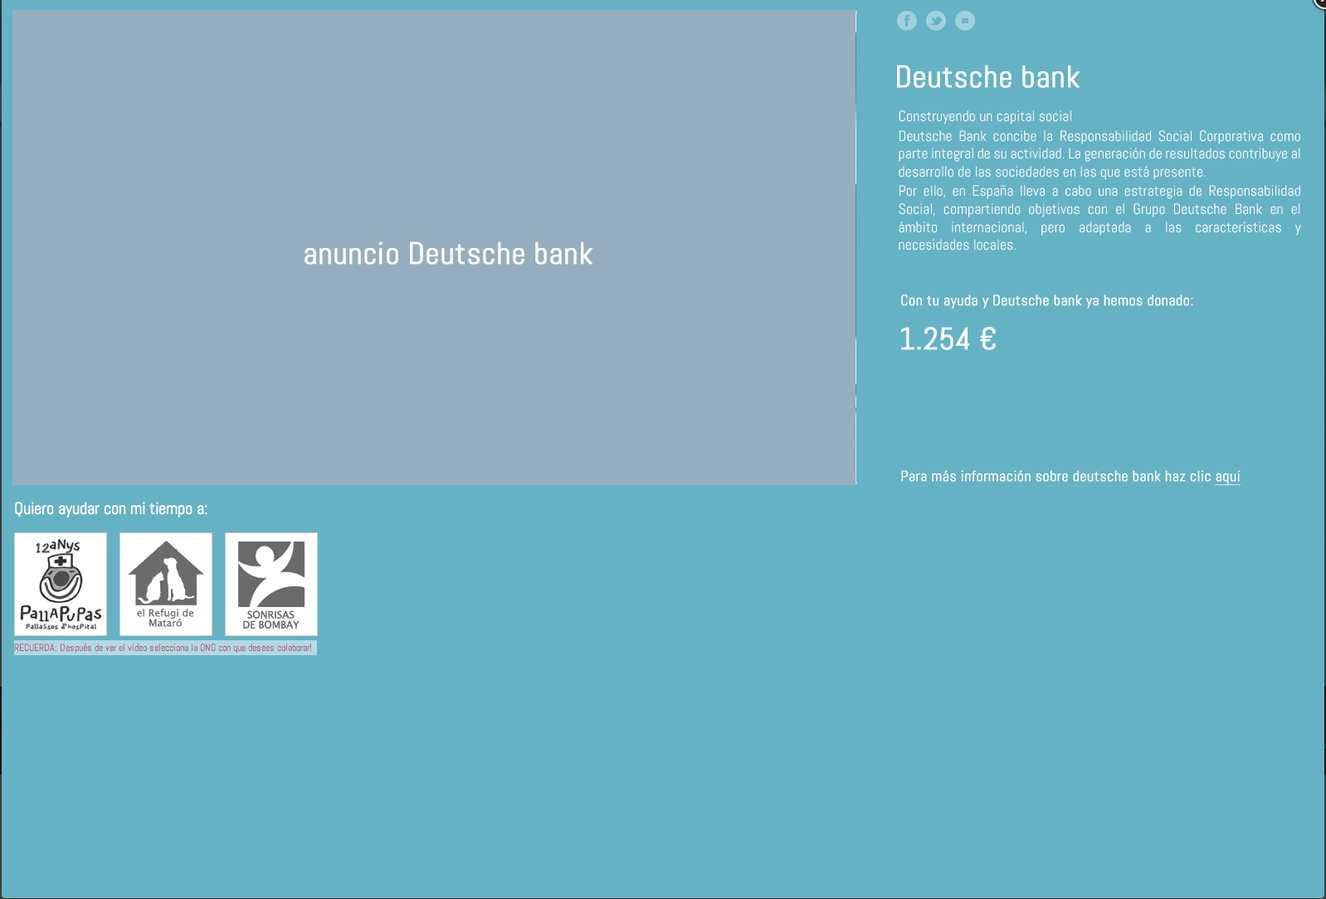
<style>
.page{position:relative;width:1326px;height:899px;background:#65b2c5}
.page>*{position:absolute;margin:0}
.t1{font:31px "Abel-Regular";color:#ffffff;font-weight:bold}
.t2{font:14.9px "Abel-Regular";color:#ffffff}
.t3{font:14.9px "Abel-Regular";color:#ffffff;font-weight:bold}
</style>
<div class="page">
<p class="t1" style="left:897px;top:65px;width:183px;height:23px">Deutsche bank</p>
<p class="t2" style="left:899px;top:110px;width:402px;height:141px;text-align:justify">Construyendo un capital social<br>Deutsche Bank concibe la Responsabilidad Social Corporativa como parte integral de su actividad. La generación de resultados contribuye al desarrollo de las sociedades en las que está presente. <br>Por ello, en España lleva a cabo una estrategia de Responsabilidad Social, compartiendo objetivos con el Grupo Deutsche Bank en el ámbito internacional, pero adaptada a las características y necesidades locales.</p>
<p class="t1" style="left:304px;top:241px;width:289px;height:24px">anuncio Deutsche bank</p>
<p class="t3" style="left:901px;top:295px;width:292px;height:14px">Con tu ayuda y Deutsche bank ya hemos donado:</p>
<p class="t1" style="left:901px;top:327px;width:95px;height:23px">1.254 €</p>
</div>
